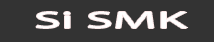
<style>
.page{position:relative;width:214px;height:42px;background:#333333}
.page>*{position:absolute;margin:0}
.t1{font:23.2px "MyriadPro-Regular";color:#ffffff;scale:2.35 1}
</style>
<div class="page">
<p class="t1" style="left:36px;top:12px;width:152px;height:16px">Si SMK</p>
</div>
